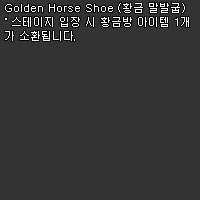
<style>
.page{position:relative;width:200px;height:200px;background:#333333}
.page>*{position:absolute;margin:0}
.t1{font:11px/14px "Dotum";color:#ffffff}
</style>
<div class="page">
<p class="t1" style="left:5px;top:3px;width:184px;height:38px">Golden Horse Shoe (황금 말발굽)<br>˚ 스테이지 입장 시 황금방 아이템 1개<br>가 소환됩니다.</p>
</div>
